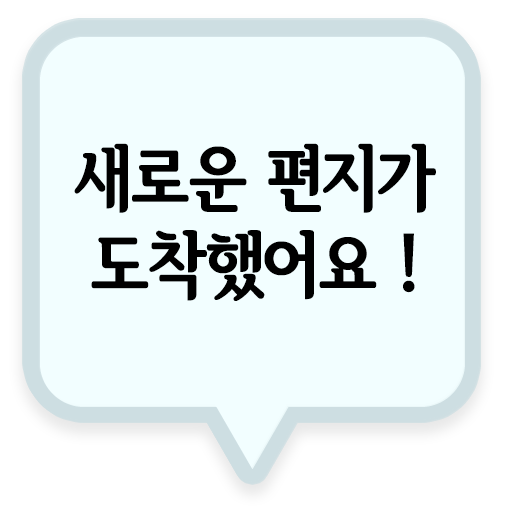
<style>
.page{position:relative;width:515px;height:510px;background:#f2feff}
.page>*{position:absolute;margin:0}
.t1{font:72px "SeoulHangangCBL";color:#000000}
</style>
<div class="page">
<p class="t1" style="left:74px;top:143px;width:362px;height:158px;text-align:center">새로운 편지가<br>도착했어요 !</p>
</div>
